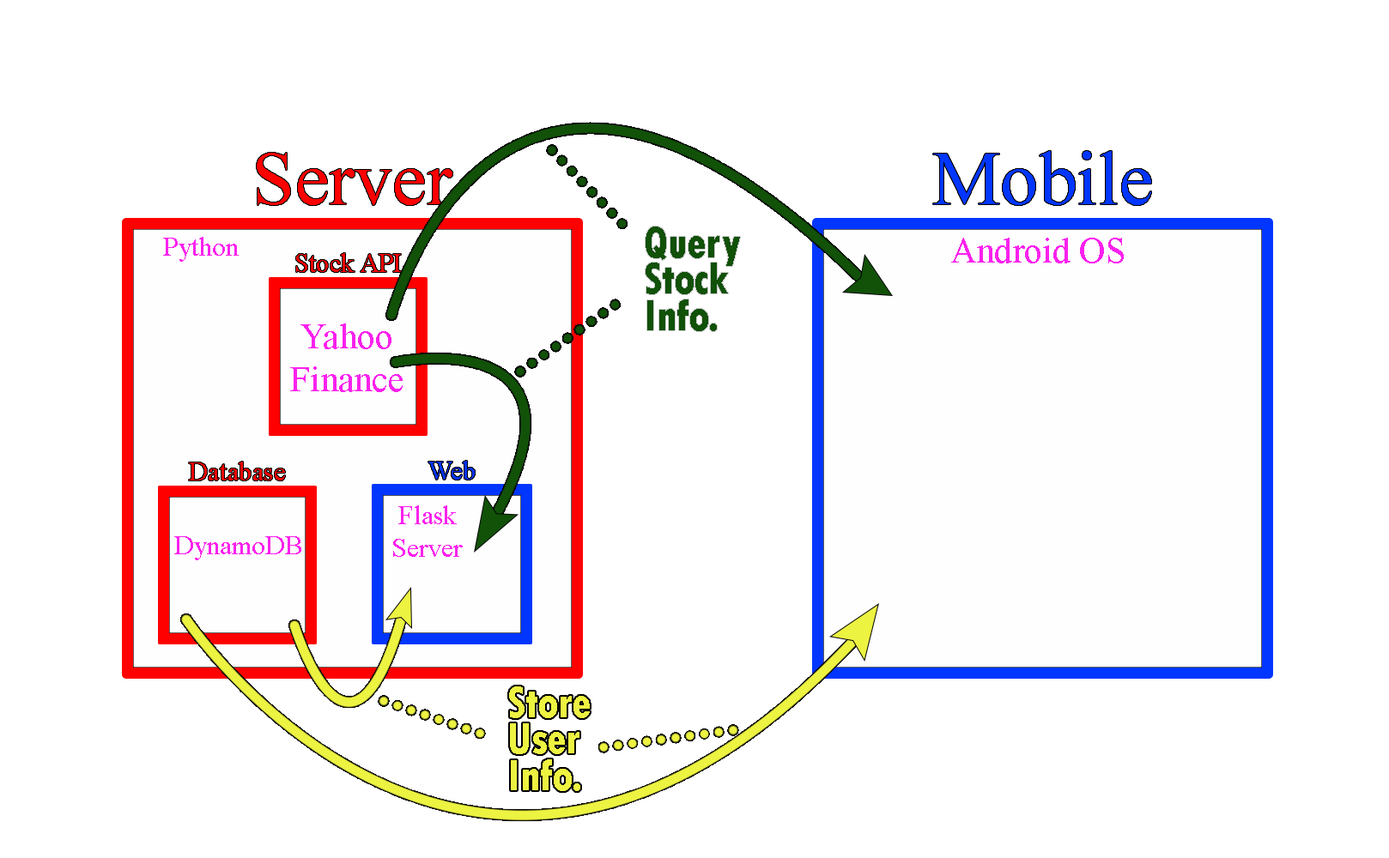
<style>
.page{position:relative;width:1389px;height:858px;background:#ffffff}
.page>*{position:absolute;margin:0}
.t1{font:76.4px "TimesNewRomanPSMT";color:#ff0000}
.t2{font:76.4px "TimesNewRomanPSMT";color:#0036ff}
.t3{font:45.1px "TwCenMT-CondensedExtraBold";color:#115108;scale:0.95 1}
.t4{font:27.5px "TimesNewRomanPSMT";color:#fb21ee}
.t5{font:36.1px "TimesNewRomanPSMT";color:#fb21ee}
.t6{font:26.3px "TimesNewRomanPSMT";color:#ff0000}
.t7{font:26.6px "TimesNewRomanPSMT";color:#0036ff}
.t8{font:45.1px "TwCenMT-CondensedExtraBold";color:#edf341;scale:0.95 1}
</style>
<div class="page">
<p class="t1" style="left:257px;top:153px;width:195px;height:52px">Server</p>
<p class="t2" style="left:933px;top:151px;width:218px;height:54px">Mobile</p>
<p class="t3" style="left:646px;top:227px;width:94px;height:104px">Query<br>Stock<br>Info.</p>
<p class="t4" style="left:163px;top:237px;width:76px;height:25px">Python</p>
<p class="t5" style="left:951px;top:238px;width:173px;height:26px">Android OS</p>
<p class="t6" style="left:296px;top:253px;width:105px;height:19px">Stock API</p>
<p class="t5" style="left:290px;top:324px;width:113px;height:68px;text-align:center">Yahoo<br>Finance</p>
<p class="t6" style="left:189px;top:462px;width:96px;height:19px">Database</p>
<p class="t7" style="left:428px;top:461px;width:47px;height:19px">Web</p>
<p class="t4" style="left:393px;top:506px;width:70px;height:51px;text-align:center">Flask<br>Server</p>
<p class="t4" style="left:174px;top:537px;width:127px;height:24px">DynamoDB</p>
<p class="t8" style="left:509px;top:687px;width:81px;height:105px">Store<br>User<br>Info.</p>
</div>
